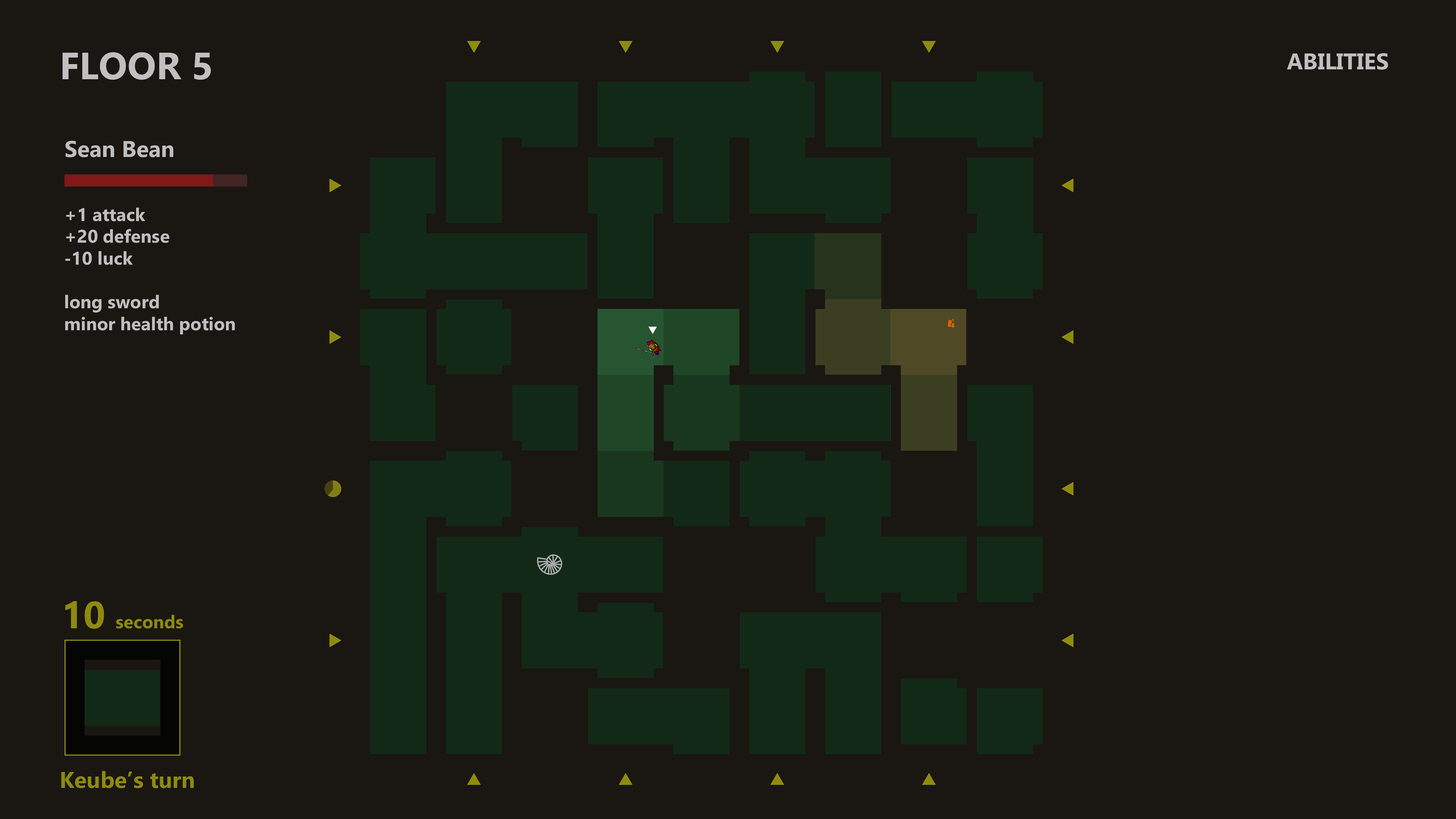
<style>
.page{position:relative;width:1456px;height:819px;background:#1a1612}
.page>*{position:absolute;margin:0}
.t1{font:37.9px "Ebrima-Bold";color:#c0c0c0}
.t2{font:22.7px "Ebrima-Bold";color:#bfbfbf}
.t3{font:18.2px "Ebrima-Bold";color:#bfbfbf}
.t4{font:18.2px "Ebrima-Bold";color:#8d8b0f}
.t5{font:37.9px "Ebrima-Bold";color:#8d8b0f}
.t6{font:22.7px "Ebrima-Bold";color:#8d8b0f}
</style>
<div class="page">
<p class="t1" style="left:63px;top:52px;width:148px;height:28px">FLOOR 5</p>
<p class="t2" style="left:1287px;top:53px;width:101px;height:17px">ABILITIES</p>
<p class="t2" style="left:65px;top:141px;width:108px;height:16px">Sean Bean</p>
<p class="t3" style="left:65px;top:207px;width:170px;height:127px">+1 attack<br>+20 defense<br>-10 luck<br><br>long sword<br>minor health potion</p>
<p class="t4" style="left:65px;top:601px;width:118px;height:28px"><span class="t5">10 </span>seconds</p>
<p class="t6" style="left:61px;top:771px;width:133px;height:17px">Keube’s turn</p>
</div>
